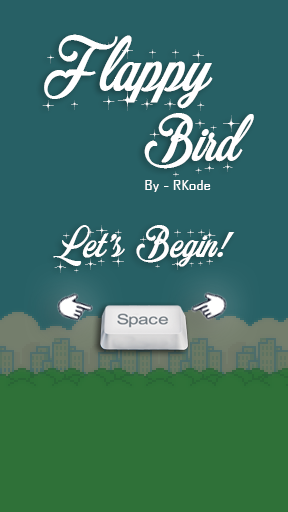
<style>
.page{position:relative;width:288px;height:512px;background:#276065}
.page>*{position:absolute;margin:0}
.t1{font:79.7px "MerryChristmasStar";color:#ffffff}
.t2{font:67.9px "MerryChristmasStar";color:#fffefe}
.t3{font:12.7px "AgencyFB-Reg";color:#fffefe;scale:1.54 1}
.t4{font:46.3px "MerryChristmasStar";color:#fffefe}
</style>
<div class="page">
<p class="t1" style="left:42px;top:34px;width:171px;height:77px">Flappy</p>
<p class="t2" style="left:144px;top:113px;width:110px;height:64px">Bird</p>
<p class="t3" style="left:145px;top:180px;width:66px;height:12px">By - RKode</p>
<p class="t4" style="left:53px;top:225px;width:182px;height:48px">Let’s Begin!</p>
</div>
